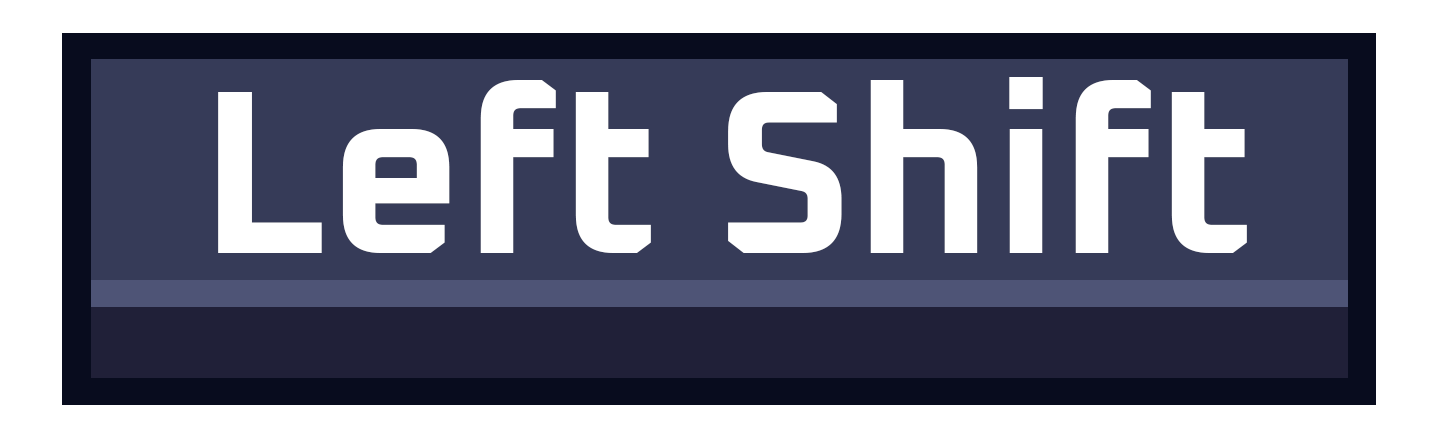
<style>
.page{position:relative;width:1454px;height:428px;background:#ffffff}
.page>*{position:absolute;margin:0}
.t1{font:234.3px "Oxanium-Bold";color:#ffffff}
</style>
<div class="page">
<p class="t1" style="left:218px;top:77px;width:1029px;height:176px">Left Shift</p>
</div>
